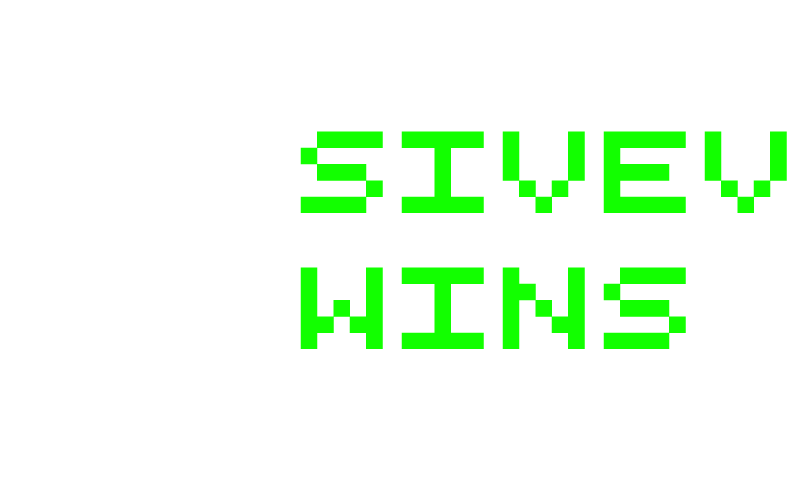
<style>
.page{position:relative;width:800px;height:480px;background:#ffffff}
.page>*{position:absolute;margin:0}
.t1{font:113px "RetroComputer";letter-spacing:0.05em;color:#12ff00;text-transform:uppercase}
</style>
<div class="page">
<p class="t1" style="left:300px;top:131px;width:487px;height:218px">SIVEV<br>WINS</p>
</div>
